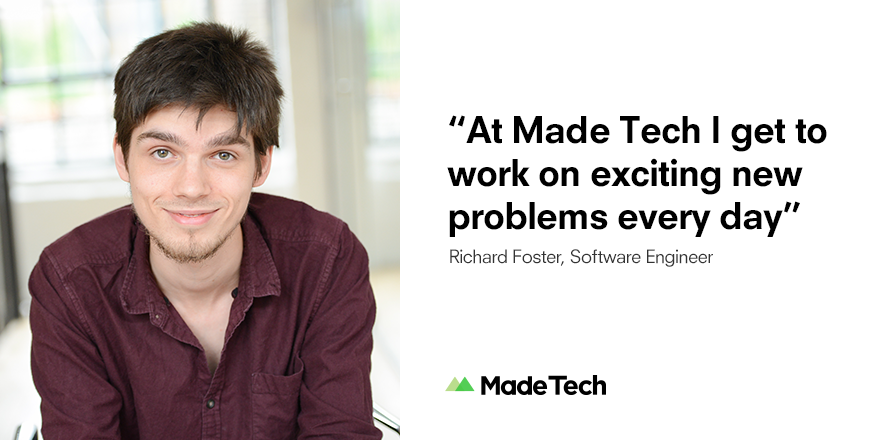
<style>
.page{position:relative;width:880px;height:440px;background:#ffffff}
.page>*{position:absolute;margin:0}
.t1{font:36px "NeuzeitS-BookHeavy";letter-spacing:-0.025em;color:#000000}
.t2{font:18px "NeuzeitS-Book";letter-spacing:-0.025em;color:#333333}
</style>
<div class="page">
<p class="t1" style="left:447px;top:115px;width:380px;height:122px">“At Made Tech I get to work on exciting new problems every day”</p>
<p class="t2" style="left:450px;top:249px;width:263px;height:18px">Richard Foster, Software Engineer</p>
</div>
